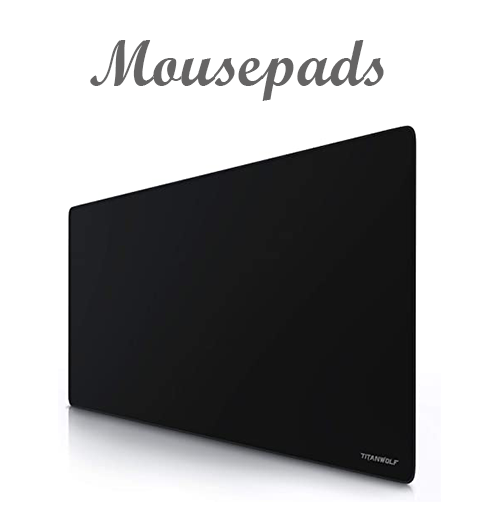
<style>
.page{position:relative;width:499px;height:526px;background:#ffffff}
.page>*{position:absolute;margin:0}
.t1{font:64px "ScriptMTBold";color:#656464}
</style>
<div class="page">
<p class="t1" style="left:90px;top:40px;width:294px;height:61px">Mousepads</p>
</div>
